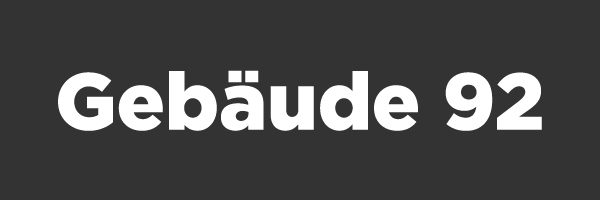
<style>
.page{position:relative;width:600px;height:200px;background:#333333}
.page>*{position:absolute;margin:0}
.t1{font:80px "Gotham-Black";color:#ffffff}
</style>
<div class="page">
<p class="t1" style="left:58px;top:70px;width:484px;height:61px">Gebäude 92</p>
</div>
